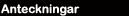
<style>
.page{position:relative;width:129px;height:16px;background:#020100}
.page>*{position:absolute;margin:0}
.t1{font:12px "ArialRoundedMTBold";color:#ffffff}
</style>
<div class="page">
<p class="t1" style="left:1px;top:4px;width:79px;height:12px">Anteckningar</p>
</div>
